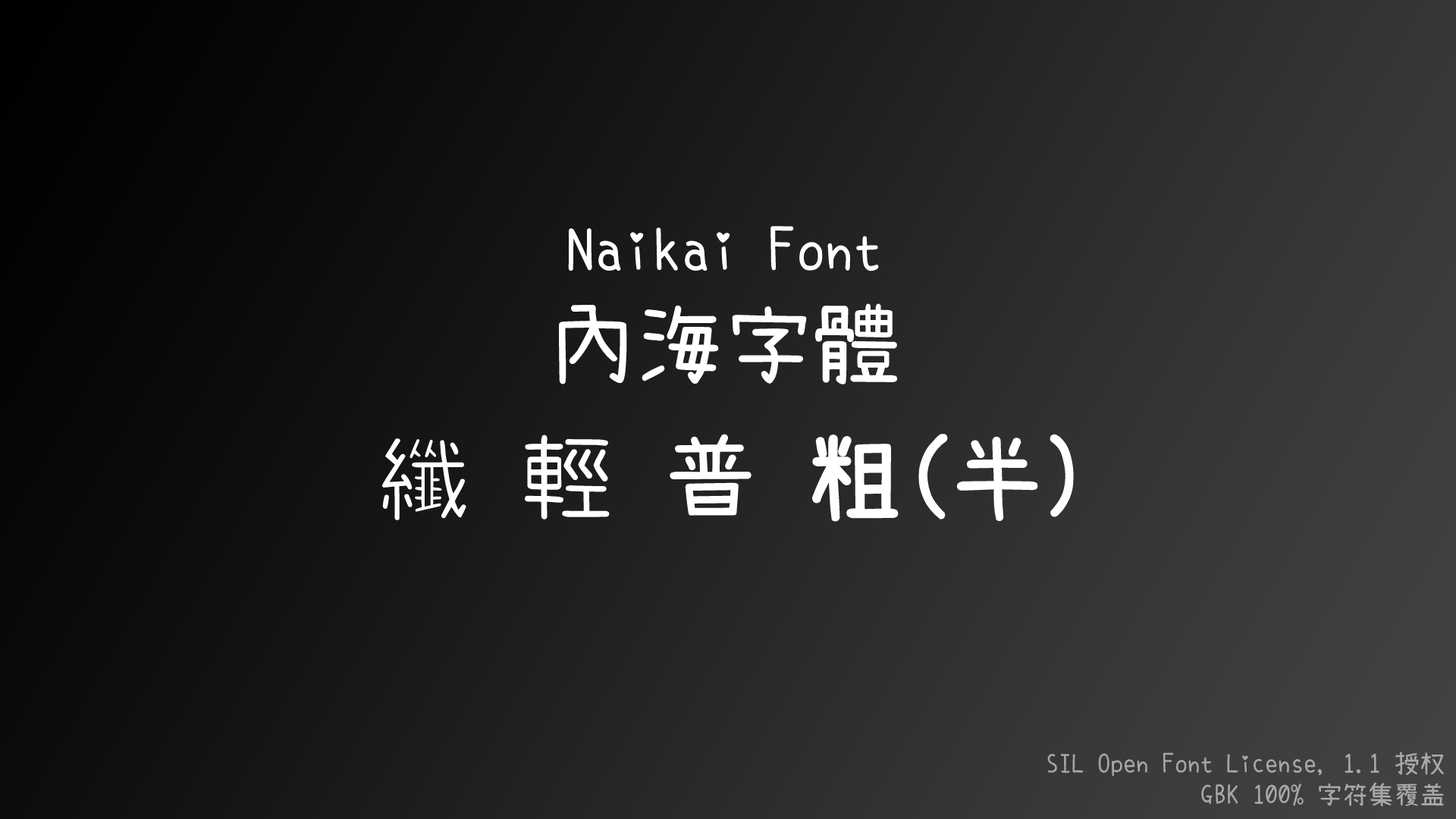
<style>
.page{position:relative;width:1456px;height:819px}
.page>*{position:absolute;margin:0}
.t1{font:57.6px "NaikaiFont-Regular";color:#ffffff}
.t2{font:88px "NaikaiFont-Regular";color:#ffffff}
.t3{font:95.5px "NaikaiFont-SemiBold";color:#ffffff}
.t4{font:95.5px "NaikaiFont-ExtraLight";color:#ffffff}
.t5{font:95.5px "NaikaiFont-Light";color:#ffffff}
.t6{font:95.5px "NaikaiFont-Regular";color:#ffffff}
.t7{font:95.5px "NaikaiFont-Bold";color:#ffffff}
.t8{font:25.8px "NaikaiFont-Regular";color:#a7a7a7}
</style>
<div class="page">
<p class="t1" style="left:558px;top:225px;width:340px;height:160px;text-align:center">Naikai Font<br><span class="t2">內海字體</span></p>
<p class="t3" style="left:381px;top:434px;width:693px;height:88px"><span class="t4">纖 </span><span class="t5">輕 </span><span class="t6">普 </span><span class="t7">粗</span>(半)</p>
<p class="t8" style="left:1047px;top:751px;width:397px;height:56px;text-align:right">SIL Open Font License, 1.1 授权<br> GBK 100% 字符集覆盖</p>
</div>
